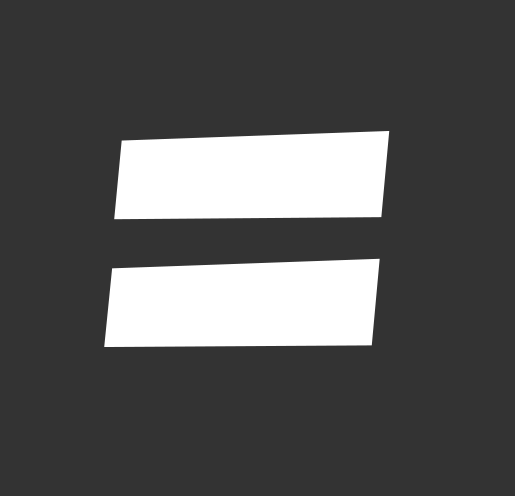
<style>
.page{position:relative;width:515px;height:496px;background:#333333}
.page>*{position:absolute;margin:0}
.t1{font:416px "GROBOLD";color:#ffffff}
</style>
<div class="page">
<p class="t1" style="left:104px;top:131px;width:286px;height:216px">=</p>
</div>
